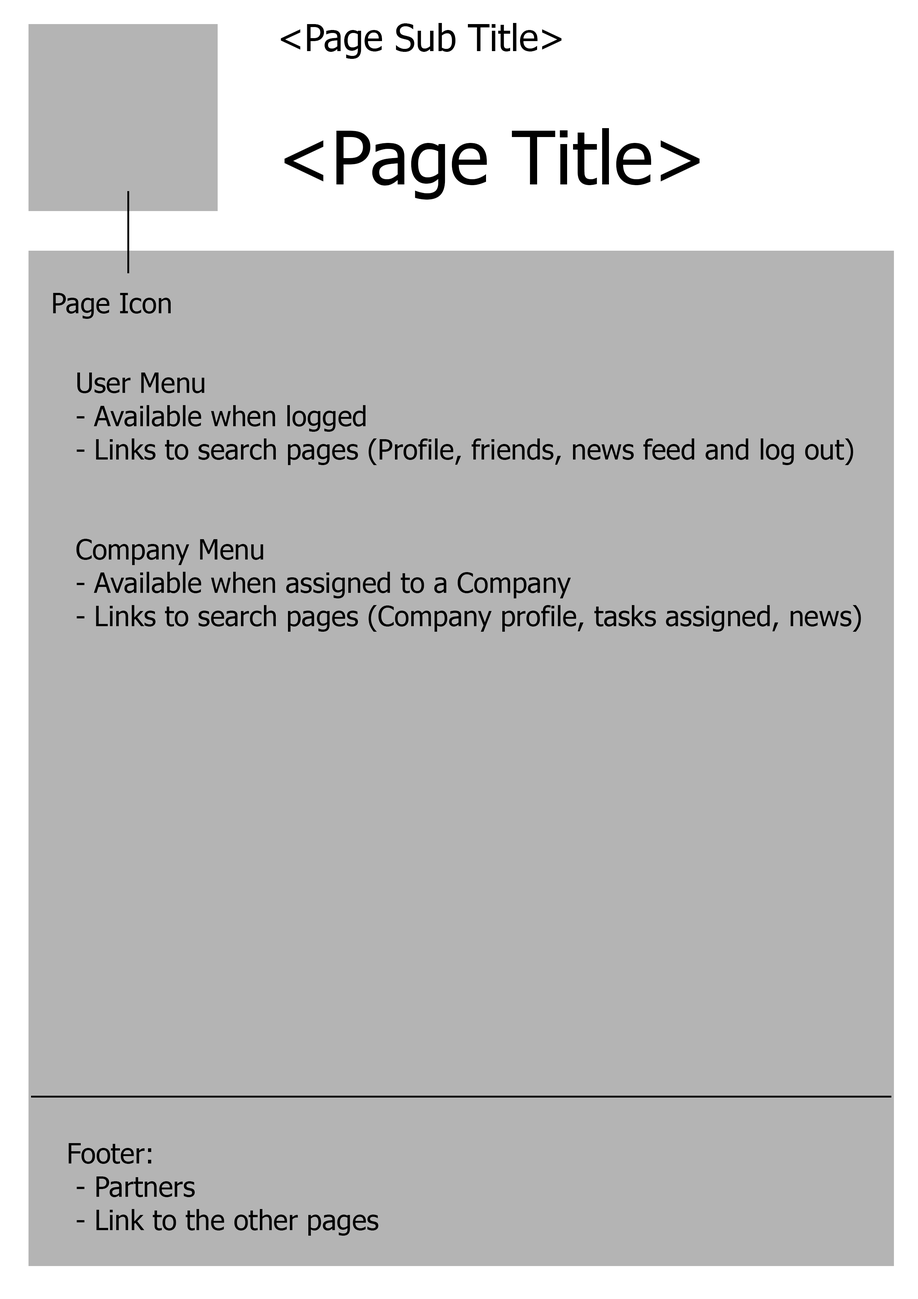
<style>
.page{position:relative;width:918px;height:1299px;background:#b4b4b4}
.page>*{position:absolute;margin:0}
.t1{font:37px "Tahoma";color:#000000}
.t2{font:74px "Tahoma";color:#000000}
.t3{font:27.8px "Tahoma";color:#000000}
</style>
<div class="page">
<p class="t1" style="left:281px;top:23px;width:419px;height:177px">&lt;Page Sub Title&gt;<br><br><span class="t2">&lt;Page Title&gt;</span></p>
<p class="t3" style="left:53px;top:293px;width:118px;height:26px">Page Icon</p>
<p class="t3" style="left:76px;top:372px;width:785px;height:260px">User Menu<br>- Available when logged<br>- Links to search pages (Profile, friends, news feed and log out)<br><br><br>Company Menu<br>- Available when assigned to a Company<br>- Links to search pages (Company profile, tasks assigned, news)</p>
<p class="t3" style="left:68px;top:1143px;width:310px;height:92px">Footer:<br> - Partners<br> - Link to the other pages</p>
</div>
